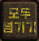
<style>
.page{position:relative;width:39px;height:41px}
.page>*{position:absolute;margin:0}
.t1{font:12px "HakgyoansimPosterB"}
</style>
<div class="page">
<p class="t1" style="left:3px;top:8px;width:33px;height:25px;text-align:center">모두<br>넘기기</p>
</div>
